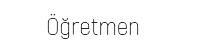
<style>
.page{position:relative;width:220px;height:50px;background:#ffffff}
.page>*{position:absolute;margin:0}
.t1{font:24px "Akrobat-Thin";color:#2a2a2a;scale:1.11 1}
</style>
<div class="page">
<p class="t1" style="left:47px;top:14px;width:92px;height:25px">Öğretmen</p>
</div>
